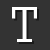
<style>
.page{position:relative;width:50px;height:50px;background:#333333}
.page>*{position:absolute;margin:0}
.t1{font:55.1px "AnonymousPro";color:#ffffff}
</style>
<div class="page">
<p class="t1" style="left:12px;top:7px;width:25px;height:35px">T</p>
</div>
